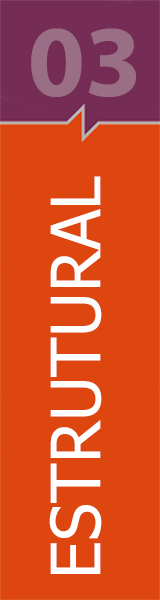
<style>
.page{position:relative;width:160px;height:600px;background:#de460f}
.page>*{position:absolute;margin:0}
.t1{font:102.3px "MyriadPro-Bold";color:#9a6f85}
.t2{font:68.3px "Tahoma";color:#ffffff;text-transform:uppercase}
</style>
<div class="page">
<p class="t1" style="left:31px;top:28px;width:105px;height:69px">03</p>
<p class="t2" style="left:49px;top:176px;width:53px;height:398px;rotate:-90deg">Estrutural</p>
</div>
